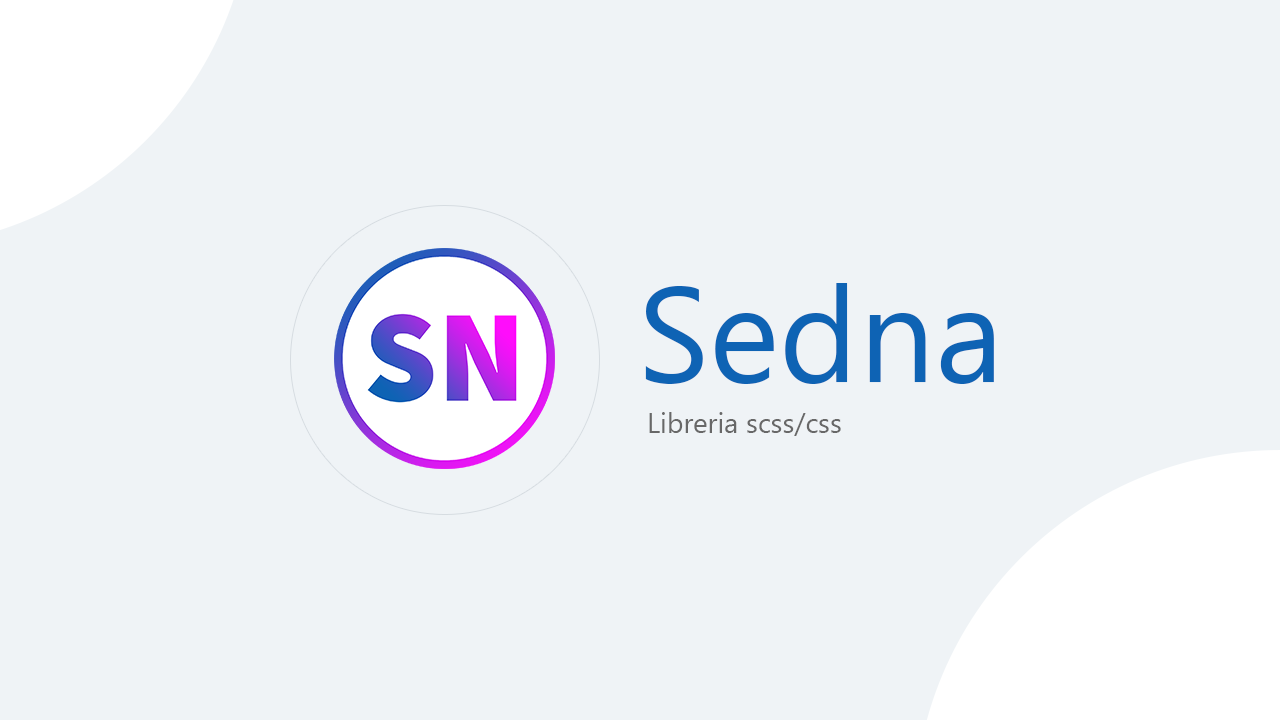
<style>
.page{position:relative;width:1280px;height:720px;background:#eff3f6}
.page>*{position:absolute;margin:0}
.t1{font:134.4px "Gadugi";color:#0e63b4}
.t2{font:27.9px "Gadugi";color:#686868}
</style>
<div class="page">
<p class="t1" style="left:645px;top:283px;width:349px;height:101px">Sedna</p>
<p class="t2" style="left:649px;top:412px;width:192px;height:24px">Libreria scss/css</p>
</div>
